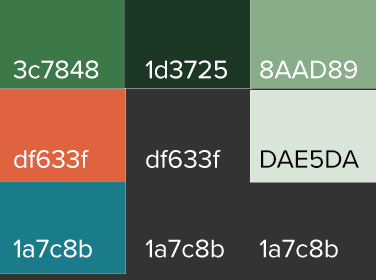
<style>
.page{position:relative;width:376px;height:280px;background:#333333}
.page>*{position:absolute;margin:0}
.t1{font:26.4px/89.4px "ProximaNova-Regular";color:#ffffff}
</style>
<div class="page">
<p class="t1" style="left:13px;top:60px;width:86px;height:198px">3c7848<br>df633f<br>1a7c8b</p>
<p class="t1" style="left:145px;top:60px;width:82px;height:198px">1d3725<br>df633f<br>1a7c8b</p>
</div>
